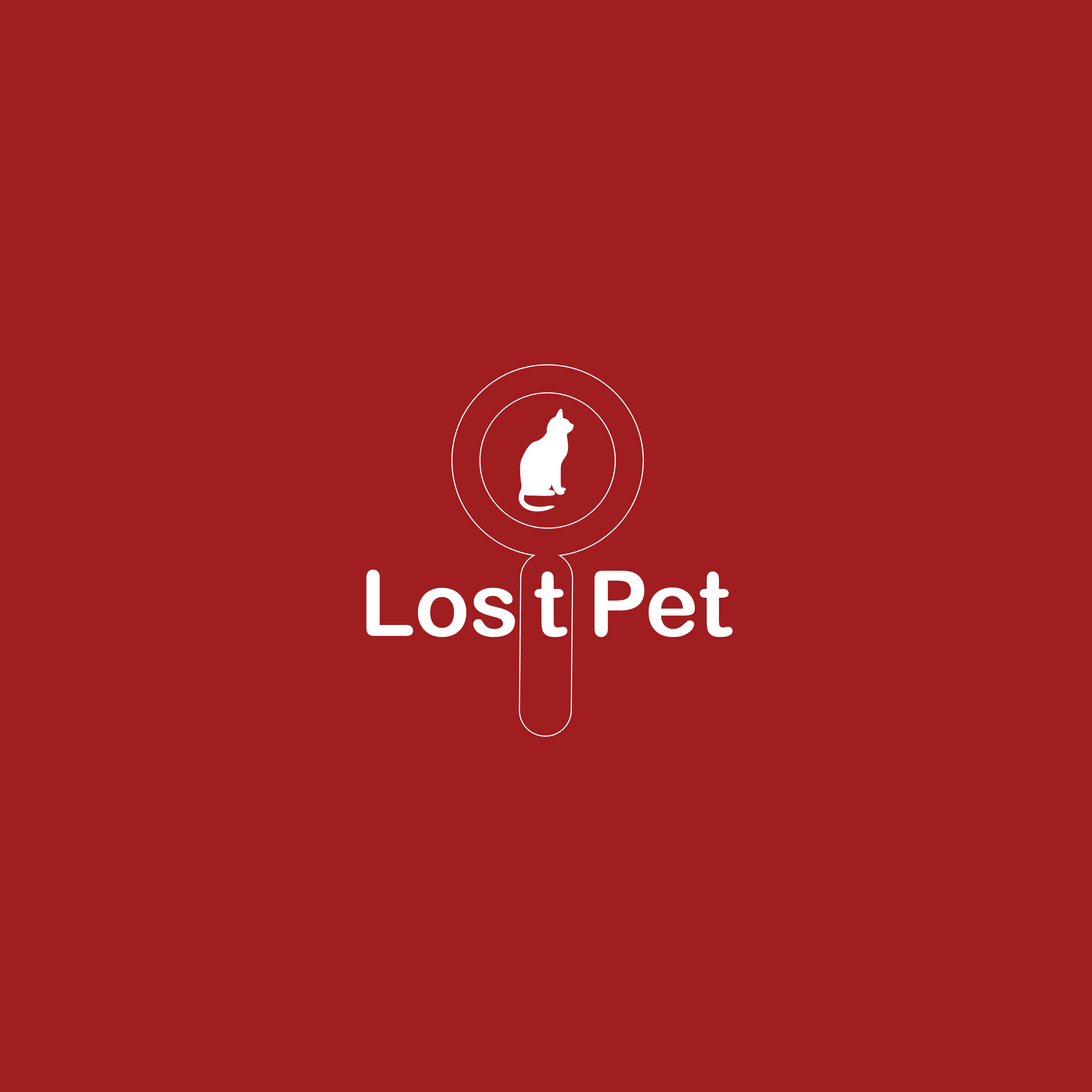
<style>
.page{position:relative;width:1092px;height:1092px;background:#a01d20}
.page>*{position:absolute;margin:0}
.t1{font:91px "ArialRoundedMTBold";color:#ffffff}
</style>
<div class="page">
<p class="t1" style="left:366px;top:570px;width:149px;height:67px">Los</p>
<p class="t1" style="left:534px;top:571px;width:33px;height:66px">t</p>
<p class="t1" style="left:594px;top:571px;width:139px;height:66px">Pet</p>
</div>
